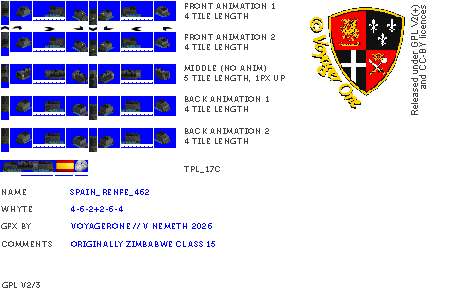
<style>
.page{position:relative;width:450px;height:300px;background:#ffffff}
.page>*{position:absolute;margin:0}
.t1{font:8px "Museo700-Regular";letter-spacing:0.075em;color:#404040;text-transform:uppercase}
.t2{font:8px "Museo700-Regular";letter-spacing:0.075em;color:#0000ff;text-transform:uppercase}
</style>
<div class="page">
<p class="t1" style="left:185px;top:3px;width:90px;height:16px">front Animation 1<br>4 tile length</p>
<p class="t1" style="left:185px;top:34px;width:90px;height:16px">front Animation 2<br>4 tile length</p>
<p class="t1" style="left:184px;top:65px;width:101px;height:17px">middle (no anim)<br>5 tile length, 1px up</p>
<p class="t1" style="left:185px;top:96px;width:84px;height:16px">back animation 1<br>4 tile length</p>
<p class="t1" style="left:185px;top:128px;width:84px;height:16px">back Animation 2<br>4 tile length</p>
<p class="t1" style="left:184px;top:166px;width:36px;height:7px">tpl_17c</p>
<p class="t1" style="left:2px;top:189px;width:24px;height:6px">name</p>
<p class="t2" style="left:70px;top:189px;width:79px;height:7px">Spain_RENFE_462</p>
<p class="t1" style="left:1px;top:206px;width:31px;height:6px">whyte</p>
<p class="t2" style="left:71px;top:206px;width:52px;height:6px">4-6-2+2-6-4</p>
<p class="t1" style="left:1px;top:223px;width:30px;height:6px">gfx by</p>
<p class="t2" style="left:71px;top:223px;width:141px;height:6px">voyagerone // v nemeth 2026</p>
<p class="t1" style="left:2px;top:241px;width:50px;height:6px">comments</p>
<p class="t2" style="left:71px;top:241px;width:144px;height:6px">originally zimbabwe class 15</p>
<p class="t1" style="left:2px;top:282px;width:38px;height:6px">gpl v2/3</p>
</div>
